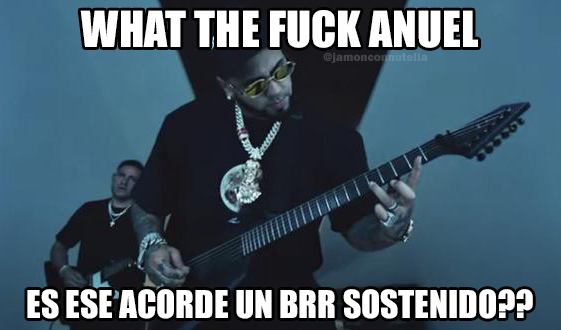
<style>
.page{position:relative;width:561px;height:330px}
.page>*{position:absolute;margin:0}
.t1{font:45.8px "Impact";color:#ffffff}
.t2{font:12px "FranklinGothic-Heavy"}
.t3{font:35.6px "Impact";color:#ffffff}
</style>
<div class="page">
<p class="t1" style="left:80px;top:10px;width:398px;height:38px">WHAT THE FUCK ANUEL</p>
<p class="t2" style="left:323px;top:52px;width:105px;height:11px">@jamonconnutella</p>
<p class="t3" style="left:27px;top:289px;width:506px;height:30px">ES ESE ACORDE UN BRR SOSTENIDO??</p>
</div>
